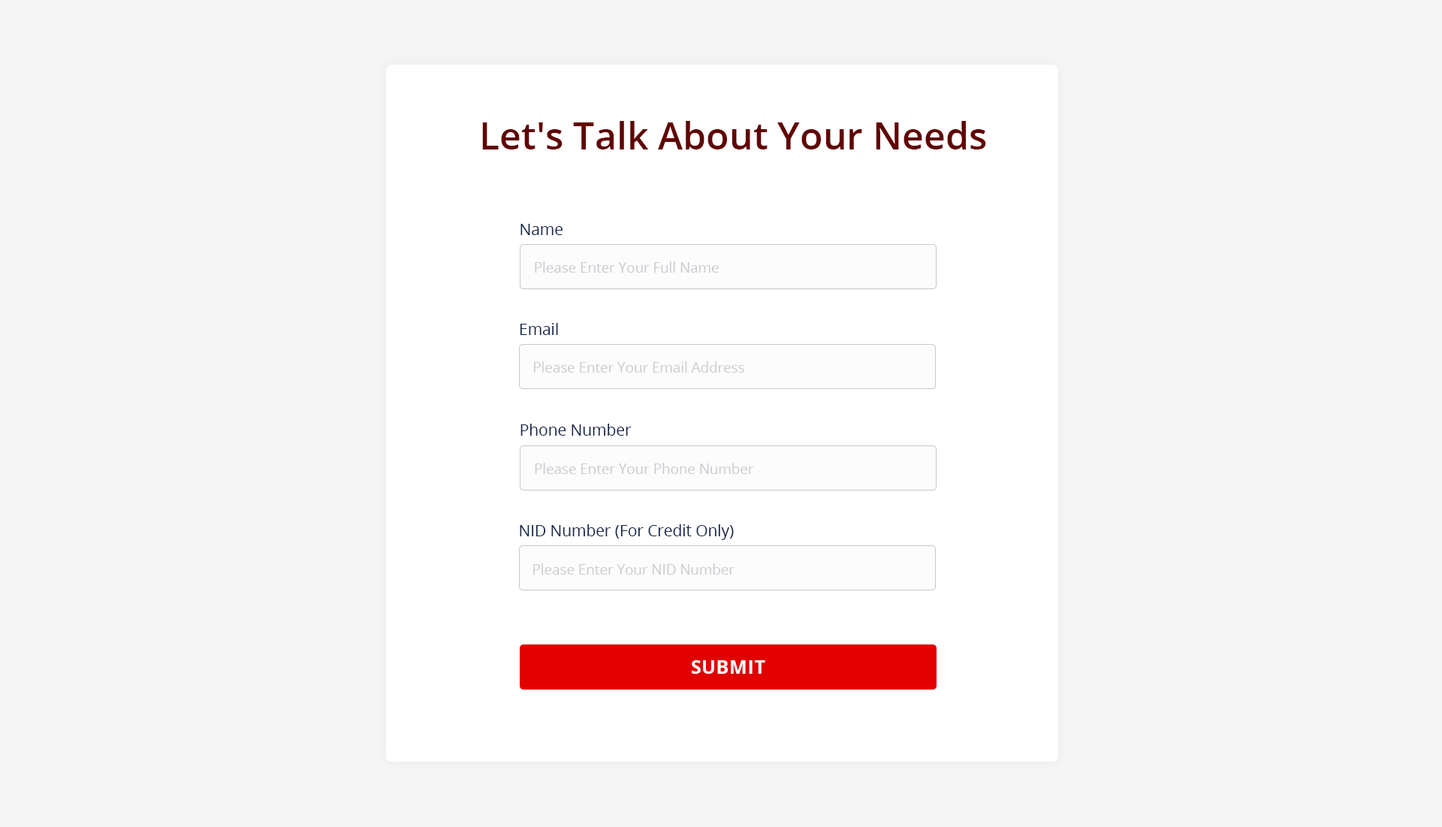
<style>
.page{position:relative;width:1442px;height:827px;background:#f5f5f5}
.page>*{position:absolute;margin:0}
.t1{font:37.6px "OpenSans-Semibold";color:#620303}
.t2{font:15.6px "OpenSans";color:#16254c}
.t3{font:14.1px "OpenSans";color:#caccd1}
.t4{font:18.8px "OpenSans-Bold";letter-spacing:0.025em;color:#ffffff;text-transform:uppercase}
</style>
<div class="page">
<p class="t1" style="left:482px;top:121px;width:504px;height:28px">Let's Talk About Your Needs</p>
<p class="t2" style="left:520px;top:224px;width:43px;height:11px">Name</p>
<p class="t3" style="left:535px;top:261px;width:184px;height:12px">Please Enter Your Full Name</p>
<p class="t2" style="left:520px;top:323px;width:38px;height:12px">Email</p>
<p class="t3" style="left:534px;top:361px;width:210px;height:12px">Please Enter Your Email Address</p>
<p class="t2" style="left:520px;top:424px;width:112px;height:12px">Phone Number</p>
<p class="t3" style="left:535px;top:463px;width:219px;height:11px">Please Enter Your Phone Number</p>
<p class="t2" style="left:520px;top:524px;width:214px;height:16px">NID Number (For Credit Only)</p>
<p class="t3" style="left:533px;top:563px;width:202px;height:12px">Please Enter Your NID Number</p>
<p class="t4" style="left:692px;top:660px;width:73px;height:14px">Submit</p>
</div>
